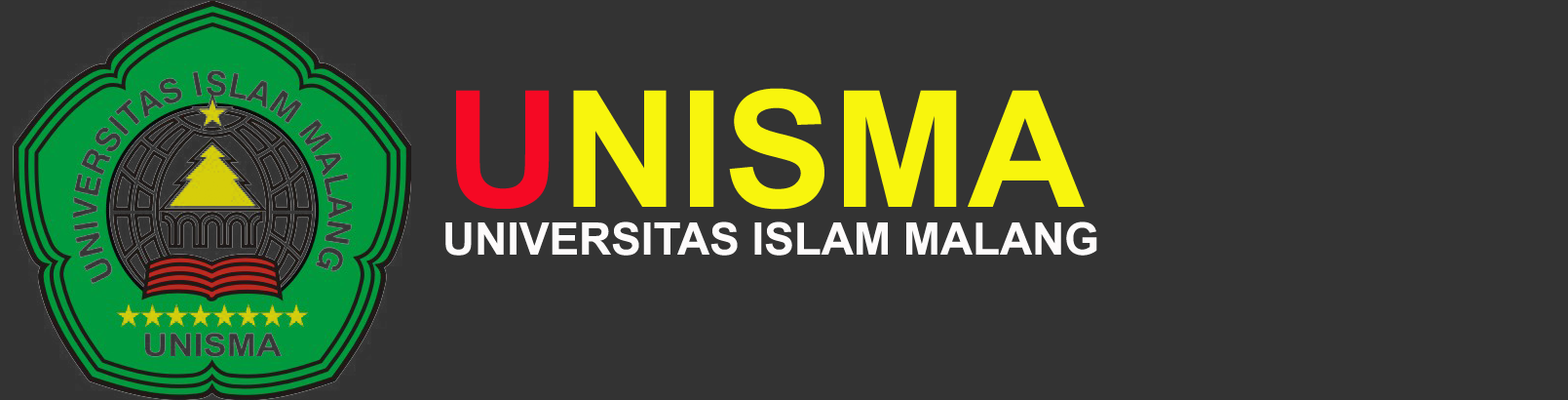
<style>
.page{position:relative;width:1568px;height:400px;background:#333333}
.page>*{position:absolute;margin:0}
.t1{font:162.4px "Arial-BoldMT";color:#f8f50d}
.t2{font:162.4px "Arial-BoldMT";color:#f50924}
.t3{font:44.7px "Arial-BoldMT";color:#fdfbfb}
</style>
<div class="page">
<p class="t1" style="left:456px;top:88px;width:629px;height:122px"><span class="t2">U</span>NISMA</p>
<p class="t3" style="left:445px;top:221px;width:652px;height:34px">UNIVERSITAS ISLAM MALANG</p>
</div>
